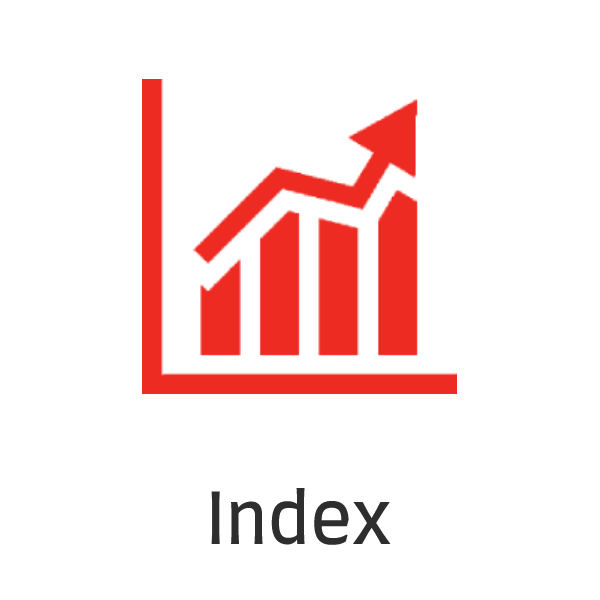
<style>
.page{position:relative;width:600px;height:600px;background:#ffffff}
.page>*{position:absolute;margin:0}
.t1{font:70px "Farro-Regular";color:#2e2e2e}
</style>
<div class="page">
<p class="t1" style="left:211px;top:488px;width:180px;height:57px">Index</p>
</div>
